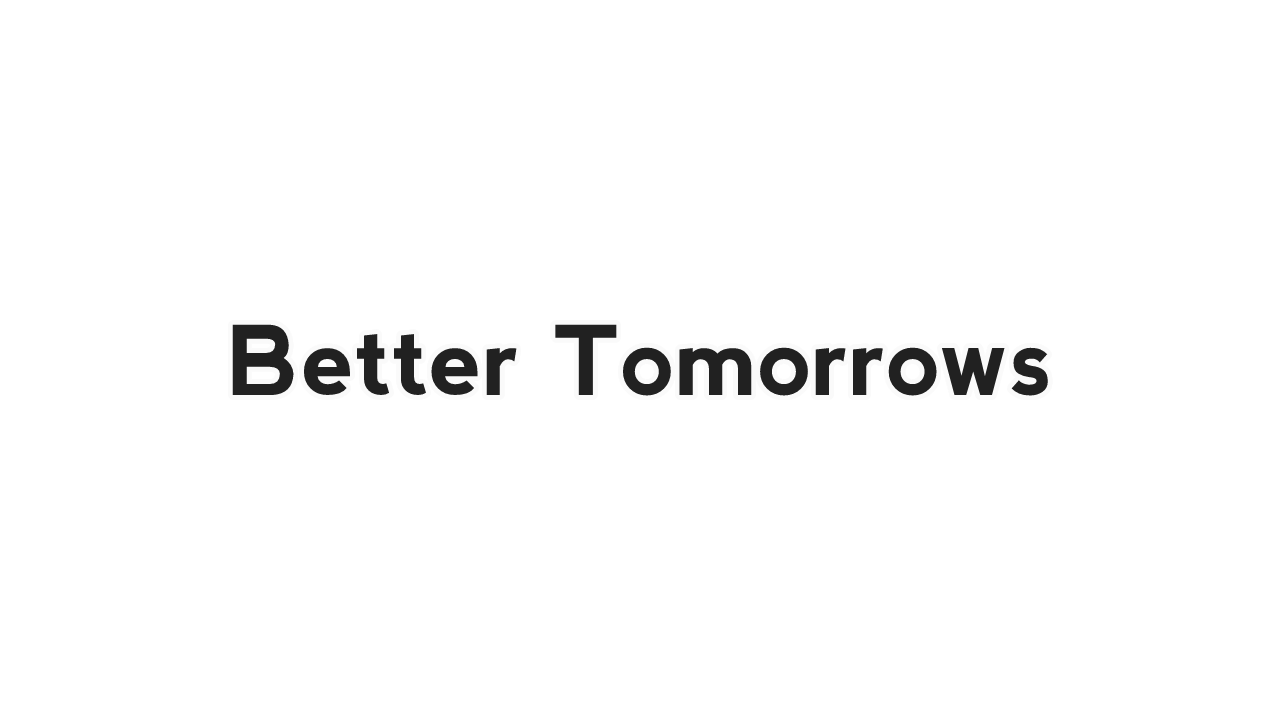
<style>
.page{position:relative;width:1280px;height:720px;background:#ffffff}
.page>*{position:absolute;margin:0}
.t1{font:96px "nevis-Bold";color:#212121}
</style>
<div class="page">
<p class="t1" style="left:232px;top:324px;width:816px;height:72px">Better Tomorrows</p>
</div>
